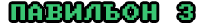
<style>
.page{position:relative;width:204px;height:24px;background:#000000}
.page>*{position:absolute;margin:0}
.t1{font:18px "PxPlus_IBM_BIOS";letter-spacing:0.075em;color:#39c773}
</style>
<div class="page">
<p class="t1" style="left:11px;top:4px;width:182px;height:16px">ПАВИЛЬОН 3</p>
</div>
